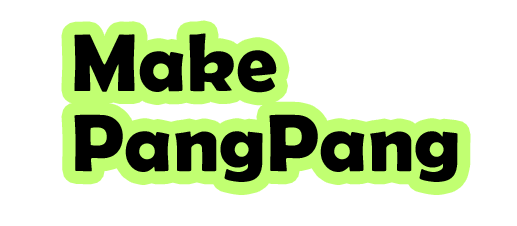
<style>
.page{position:relative;width:517px;height:226px;background:#ffffff}
.page>*{position:absolute;margin:0}
.t1{font:82px/80px "BerlinSansFBDemi-Bold";color:#000000}
</style>
<div class="page">
<p class="t1" style="left:74px;top:33px;width:384px;height:149px">Make<br>PangPang</p>
</div>
